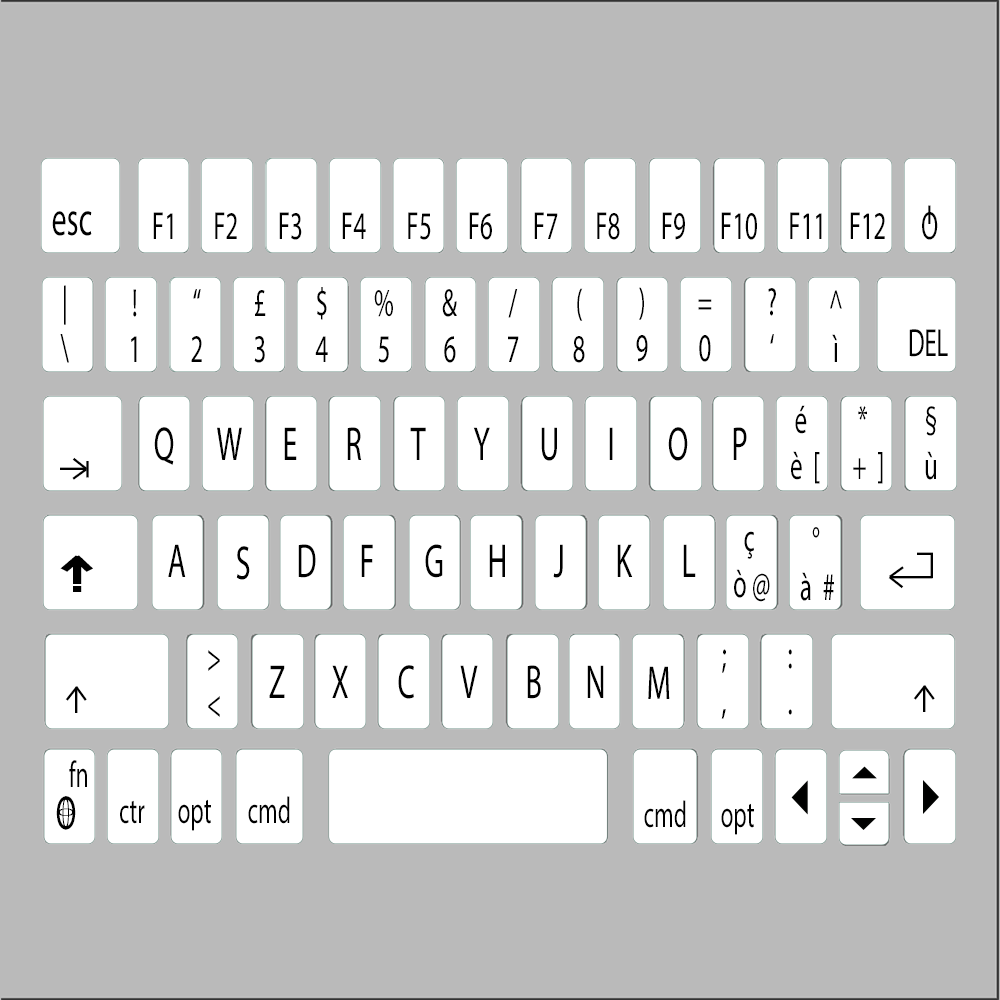
<style>
.page{position:relative;width:1000px;height:1000px;background:#bababa}
.page>*{position:absolute;margin:0}
.t1{font:27.4px "MyriadPro-Regular";color:#000000;scale:0.91 1}
.t2{font:47.9px "MyriadPro-Regular";color:#000000;scale:0.63 1}
.t3{font:39.3px "MyriadPro-Regular";color:#000000;scale:0.63 1}
.t4{font:39.3px/22.9px "MyriadPro-Regular";color:#000000;scale:0.63 1}
.t5{font:47.9px "MyriadPro-Regular";color:#000000;scale:0.69 1}
.t6{font:47.9px "MyriadPro-Regular";color:#000000;scale:1.08 1}
.t7{font:63.6px "AmericanTypewriter-Bold";color:#000000;scale:0.63 1}
.t8{font:64.3px "AmericanTypewriter-Bold";color:#000000;scale:0.61 1}
.t9{font:47.9px "MyriadPro-Regular";color:#000000;scale:0.67 1}
.t10{font:47.9px "MyriadPro-Regular";color:#000000}
.t11{font:70.7px "AmericanTypewriter-Bold";color:#000000;scale:0.67 1}
.t12{font:47.9px "MyriadPro-Regular";color:#000000;scale:1.78 1}
.t13{font:71.1px "AmericanTypewriter-Bold";color:#000000;scale:0.17 1}
.t14{font:47.9px "MyriadPro-Bold";color:#000000;scale:0.69 1}
.t15{font:47.9px "MyriadPro-Bold";color:#000000}
.t16{font:37.3px "MyriadPro-Regular";color:#000000;scale:0.63 1}
.t17{font:47.9px "MyriadPro-Regular";color:#000000;scale:0.22 1}
.t18{font:11px "MyriadPro-Regular";color:#000000;scale:2.5 1}
.t19{font:35.8px "MyriadPro-Regular";color:#000000;scale:0.63 1}
</style>
<div class="page">
<p class="t1" style="left:928px;top:205px;width:3px;height:19px">I</p>
<p class="t2" style="left:52px;top:211px;width:40px;height:25px">esc</p>
<p class="t3" style="left:153px;top:212px;width:20px;height:27px">F1</p>
<p class="t3" style="left:215px;top:212px;width:22px;height:27px">F2</p>
<p class="t3" style="left:279px;top:212px;width:23px;height:28px">F3</p>
<p class="t3" style="left:342px;top:212px;width:24px;height:27px">F4</p>
<p class="t3" style="left:408px;top:212px;width:23px;height:28px">F5</p>
<p class="t3" style="left:469px;top:212px;width:23px;height:28px">F6</p>
<p class="t3" style="left:534px;top:212px;width:24px;height:27px">F7</p>
<p class="t3" style="left:597px;top:212px;width:23px;height:28px">F8</p>
<p class="t3" style="left:662px;top:212px;width:23px;height:28px">F9</p>
<p class="t3" style="left:721px;top:212px;width:36px;height:28px">F10</p>
<p class="t3" style="left:790px;top:212px;width:32px;height:27px">F11</p>
<p class="t3" style="left:850px;top:212px;width:35px;height:27px">F12</p>
<p class="t3" style="left:922px;top:212px;width:16px;height:28px">O</p>
<p class="t4" style="left:60px;top:285px;width:9px;height:78px;text-align:center">|<br><br>\</p>
<p class="t4" style="left:131px;top:289px;width:6px;height:73px;text-align:center">!<br><br>1</p>
<p class="t4" style="left:191px;top:289px;width:11px;height:73px;text-align:center">“<br><br>2</p>
<p class="t4" style="left:254px;top:290px;width:12px;height:73px;text-align:center">£<br><br>3</p>
<p class="t4" style="left:315px;top:287px;width:13px;height:75px;text-align:center">$<br><br>4</p>
<p class="t4" style="left:374px;top:290px;width:19px;height:73px;text-align:center">%<br><br>5</p>
<p class="t4" style="left:442px;top:289px;width:15px;height:74px;text-align:center">&amp;<br><br>6</p>
<p class="t4" style="left:508px;top:289px;width:11px;height:73px;text-align:center">/<br><br>7</p>
<p class="t4" style="left:573px;top:288px;width:12px;height:75px;text-align:center">(<br><br>8</p>
<p class="t4" style="left:636px;top:287px;width:12px;height:75px;text-align:center">)<br><br>9</p>
<p class="t4" style="left:768px;top:288px;width:8px;height:56px;text-align:center">?<br><br>‘</p>
<p class="t4" style="left:830px;top:290px;width:12px;height:72px;text-align:center">^<br><br>ì</p>
<p class="t4" style="left:698px;top:299px;width:14px;height:63px;text-align:center">=<br><br>0</p>
<p class="t3" style="left:909px;top:329px;width:39px;height:28px">DEL</p>
<p class="t4" style="left:791px;top:405px;width:29px;height:79px;text-align:center">é<br><br>è  [</p>
<p class="t4" style="left:853px;top:406px;width:30px;height:78px;text-align:center">*<br><br>+  ]</p>
<p class="t4" style="left:925px;top:406px;width:11px;height:74px;text-align:center">§<br><br>ù</p>
<p class="t2" style="left:154px;top:427px;width:20px;height:38px">Q</p>
<p class="t2" style="left:217px;top:427px;width:25px;height:33px">W</p>
<p class="t2" style="left:284px;top:427px;width:13px;height:33px">E</p>
<p class="t2" style="left:347px;top:427px;width:15px;height:33px">R</p>
<p class="t2" style="left:410px;top:427px;width:16px;height:33px">T</p>
<p class="t2" style="left:473px;top:427px;width:17px;height:33px">Y</p>
<p class="t2" style="left:541px;top:427px;width:16px;height:34px">U</p>
<p class="t2" style="left:609px;top:427px;width:4px;height:33px">I</p>
<p class="t2" style="left:668px;top:427px;width:20px;height:34px">O</p>
<p class="t2" style="left:733px;top:427px;width:14px;height:33px">P</p>
<p class="t5" style="left:72px;top:457px;width:16px;height:13px;rotate:38deg">_</p>
<p class="t5" style="left:86px;top:461px;width:3px;height:17px;rotate:90deg">_</p>
<p class="t6" style="left:60px;top:467px;width:26px;height:3px">_</p>
<p class="t5" style="left:72px;top:468px;width:16px;height:12px;rotate:144deg">_</p>
<p class="t4" style="left:734px;top:531px;width:36px;height:71px;text-align:center">ç<br><br>ò @</p>
<p class="t4" style="left:800px;top:527px;width:34px;height:74px;text-align:center">°<br><br>à  #</p>
<p class="t2" style="left:168px;top:544px;width:18px;height:33px">A</p>
<p class="t2" style="left:298px;top:544px;width:18px;height:34px">D</p>
<p class="t2" style="left:361px;top:544px;width:12px;height:33px">F</p>
<p class="t2" style="left:425px;top:544px;width:18px;height:34px">G</p>
<p class="t2" style="left:489px;top:544px;width:16px;height:33px">H</p>
<p class="t2" style="left:553px;top:544px;width:10px;height:34px">J</p>
<p class="t2" style="left:617px;top:544px;width:16px;height:33px">K</p>
<p class="t2" style="left:683px;top:544px;width:13px;height:33px">L</p>
<p class="t7" style="left:60px;top:555px;width:23px;height:17px;rotate:-40deg">_</p>
<p class="t8" style="left:72px;top:555px;width:21px;height:17px;rotate:43deg">_</p>
<p class="t2" style="left:236px;top:546px;width:14px;height:34px">S</p>
<p class="t9" style="left:917px;top:552px;width:16px;height:3px">_</p>
<p class="t10" style="left:930px;top:554px;width:3px;height:24px;rotate:-90deg">_</p>
<p class="t11" style="left:73px;top:560px;width:9px;height:24px;rotate:-90deg">_</p>
<p class="t5" style="left:889px;top:566px;width:15px;height:12px;rotate:-36deg">_</p>
<p class="t5" style="left:888px;top:576px;width:16px;height:13px;rotate:-142deg">_</p>
<p class="t12" style="left:890px;top:576px;width:43px;height:3px;rotate:180deg">_</p>
<p class="t13" style="left:73px;top:586px;width:9px;height:6px;rotate:-90deg">_</p>
<p class="t4" style="left:208px;top:650px;width:12px;height:67px;text-align:center">&gt;<br><br>&lt;</p>
<p class="t4" style="left:721px;top:649px;width:5px;height:70px;text-align:center">;<br><br>,</p>
<p class="t4" style="left:788px;top:649px;width:4px;height:66px;text-align:center">:<br><br>.</p>
<p class="t2" style="left:269px;top:665px;width:16px;height:33px">Z</p>
<p class="t2" style="left:332px;top:665px;width:16px;height:33px">X</p>
<p class="t2" style="left:398px;top:665px;width:16px;height:34px">C</p>
<p class="t2" style="left:460px;top:665px;width:18px;height:33px">V</p>
<p class="t2" style="left:527px;top:665px;width:14px;height:34px">B</p>
<p class="t2" style="left:587px;top:665px;width:17px;height:33px">N</p>
<p class="t2" style="left:648px;top:666px;width:22px;height:33px">M</p>
<p class="t14" style="left:65px;top:686px;width:13px;height:15px;rotate:-52deg">_</p>
<p class="t15" style="left:75px;top:688px;width:3px;height:25px;rotate:-90deg">_</p>
<p class="t14" style="left:75px;top:686px;width:12px;height:15px;rotate:54deg">_</p>
<p class="t14" style="left:913px;top:685px;width:13px;height:15px;rotate:-52deg">_</p>
<p class="t15" style="left:923px;top:687px;width:3px;height:25px;rotate:-90deg">_</p>
<p class="t14" style="left:923px;top:685px;width:12px;height:15px;rotate:54deg">_</p>
<p class="t16" style="left:69px;top:760px;width:18px;height:27px">fn</p>
<p class="t2" style="left:56px;top:796px;width:20px;height:34px">O</p>
<p class="t17" style="left:62px;top:796px;width:7px;height:34px">O</p>
<p class="t16" style="left:248px;top:796px;width:42px;height:28px">cmd</p>
<p class="t18" style="left:57px;top:808px;width:18px;height:8px">O</p>
<p class="t19" style="left:120px;top:800px;width:25px;height:24px">ctr</p>
<p class="t16" style="left:178px;top:799px;width:33px;height:32px">opt</p>
<p class="t16" style="left:644px;top:800px;width:42px;height:28px">cmd</p>
<p class="t16" style="left:721px;top:803px;width:33px;height:32px">opt</p>
</div>
